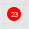
<style>
.page{position:relative;width:29px;height:29px;background:#e7e7e7}
.page>*{position:absolute;margin:0}
.t1{font:6.9px "Avenir-Light"}
</style>
<div class="page">
<p class="t1" style="left:11px;top:12px;width:7px;height:5px">23</p>
</div>
